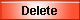
<style>
.page{position:relative;width:80px;height:20px}
.page>*{position:absolute;margin:0}
.t1{font:12px "Arial-BoldMT";color:#101010}
</style>
<div class="page">
<p class="t1" style="left:22px;top:6px;width:35px;height:9px">Delete</p>
</div>
